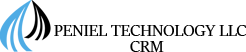
<style>
.page{position:relative;width:246px;height:52px;background:#ffffff}
.page>*{position:absolute;margin:0}
.t1{font:18px "SitkaBanner";color:#000000}
</style>
<div class="page">
<p class="t1" style="left:54px;top:25px;width:193px;height:11px">PENIEL TECHNOLOGY LLC</p>
<p class="t1" style="left:130px;top:41px;width:34px;height:11px">CRM</p>
</div>
